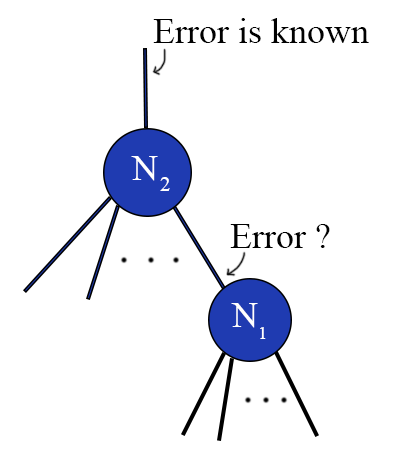
<style>
.page{position:relative;width:398px;height:470px;background:#ffffff}
.page>*{position:absolute;margin:0}
.t1{font:36px "TimesNewRomanPSMT";color:#000000}
.t2{font:36px "TimesNewRomanPSMT";color:#ffffff}
.t3{font:21px "TimesNewRomanPSMT";color:#ffffff}
.t4{font:19px "TimesNewRomanPSMT";color:#ffffff}
</style>
<div class="page">
<p class="t1" style="left:153px;top:18px;width:216px;height:25px">Error is known</p>
<p class="t2" style="left:131px;top:156px;width:27px;height:25px">N</p>
<p class="t3" style="left:160px;top:177px;width:10px;height:14px">2</p>
<p class="t1" style="left:230px;top:224px;width:100px;height:24px">Error ?</p>
<p class="t2" style="left:231px;top:303px;width:27px;height:25px">N</p>
<p class="t4" style="left:260px;top:327px;width:6px;height:12px">1</p>
</div>
